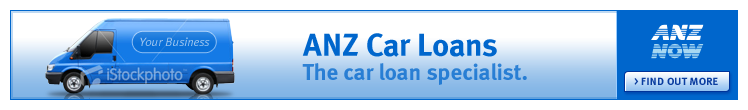
<style>
.page{position:relative;width:748px;height:110px;background:#ffffff}
.page>*{position:absolute;margin:0}
.t1{font:12px "MetaNormalLF-Italic";color:#9fc6f0}
.t2{font:32px "MetaBoldLF-Roman";color:#0066cc}
.t3{font:23px "MetaBoldLF-Roman";color:#287ed4}
.t4{font:11px "MetaBoldLF-Roman";letter-spacing:0.035em;color:#0a3da0}
.t5{font:12px "MetaMedium-Roman";color:#0a3da0}
</style>
<div class="page">
<p class="t1" style="left:140px;top:37px;width:70px;height:9px">Your Business</p>
<p class="t2" style="left:302px;top:33px;width:195px;height:24px">ANZ Car Loans</p>
<p class="t3" style="left:302px;top:63px;width:225px;height:22px">The car loan specialist.</p>
<p class="t4" style="left:634px;top:77px;width:84px;height:8px"><span class="t5">&gt; </span>FIND OUT MORE</p>
</div>
